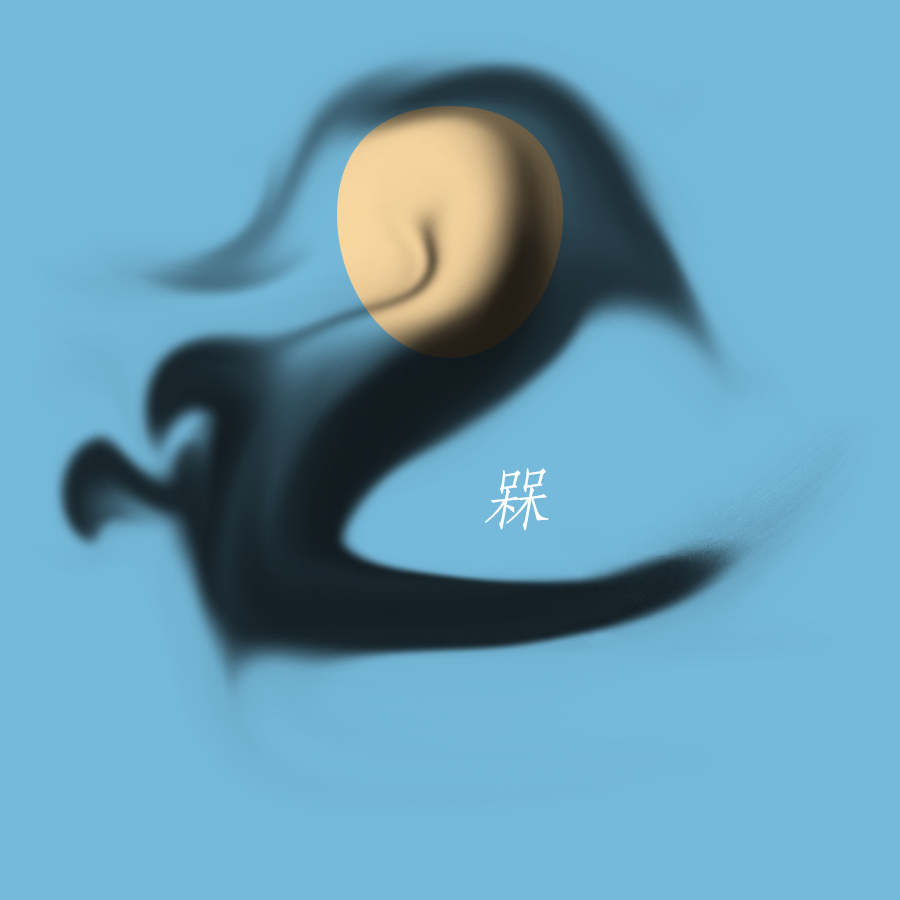
<style>
.page{position:relative;width:900px;height:900px;background:#75badb}
.page>*{position:absolute;margin:0}
.t1{font:72px "STFangsong";color:#ffffff;text-transform:uppercase;font-style:italic}
</style>
<div class="page">
<p class="t1" style="left:485px;top:468px;width:64px;height:63px">槑</p>
</div>
